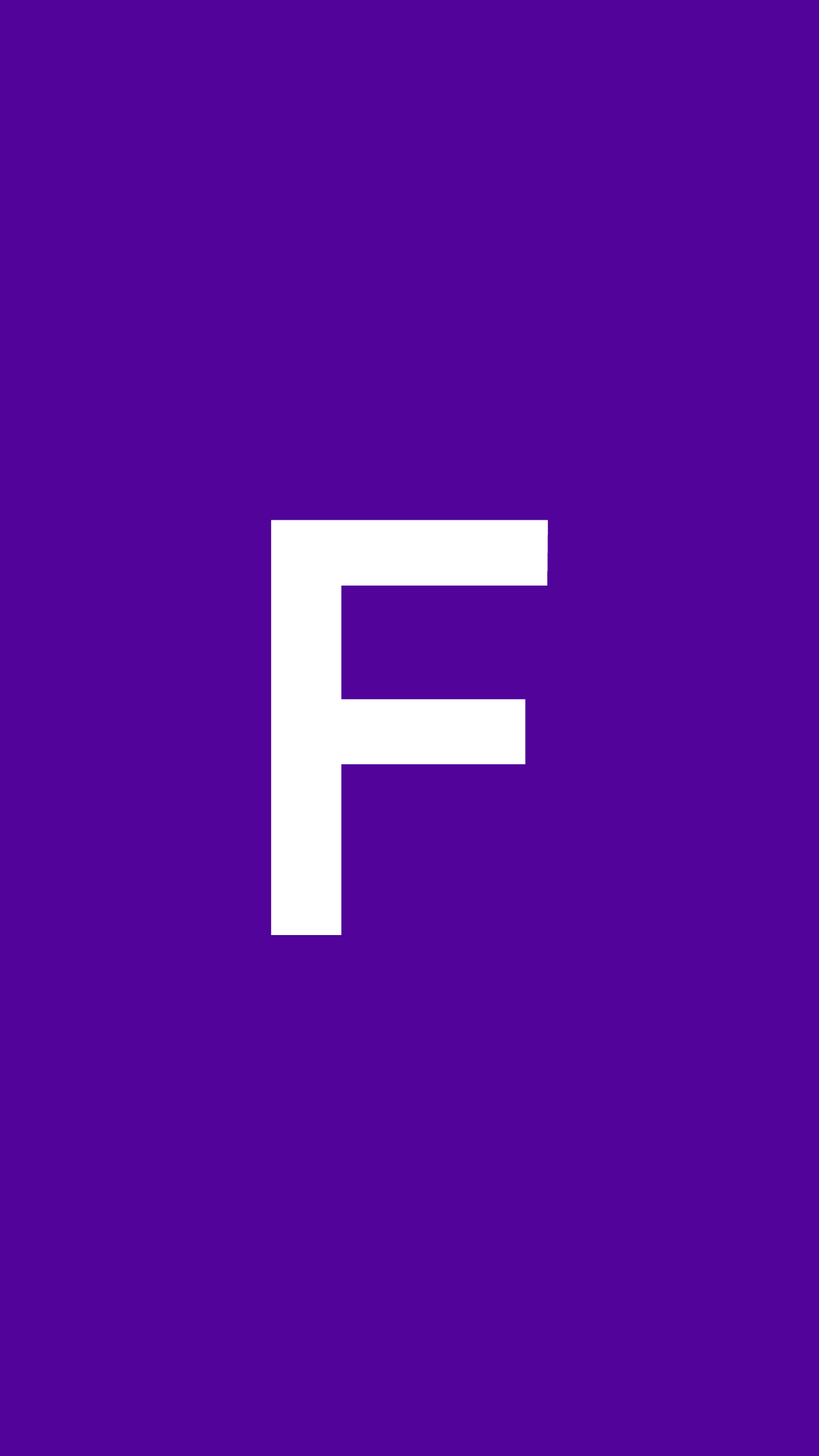
<style>
.page{position:relative;width:819px;height:1456px;background:#51039a}
.page>*{position:absolute;margin:0}
.t1{font:593.5px "Montserrat-Regular";color:#ffffff}
</style>
<div class="page">
<p class="t1" style="left:271px;top:520px;width:277px;height:415px">F</p>
</div>
